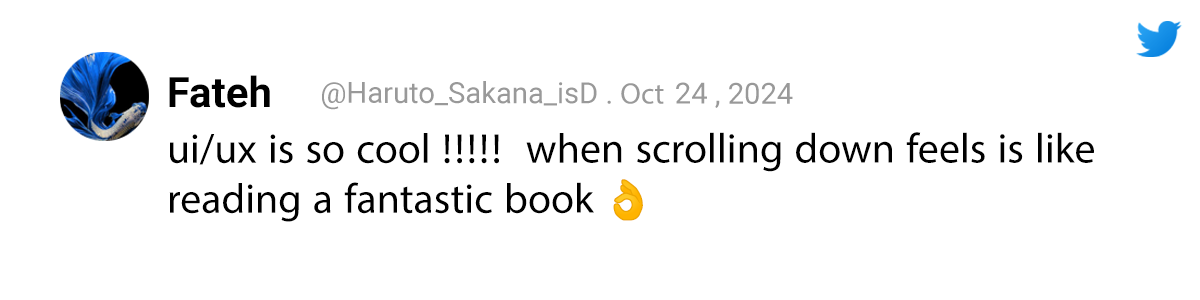
<style>
.page{position:relative;width:1200px;height:300px;background:#ffffff}
.page>*{position:absolute;margin:0}
.t1{font:41.9px "Roboto-Bold";color:#000000}
.t2{font:29.2px "Roboto-Regular";color:#999999}
.t3{font:41.7px "MyriadArabic-Regular";color:#999999}
.t4{font:58.7px "MyriadArabic-Regular";color:#000000}
.t5{font:37.5px "NotoColorEmoji-SVG";color:#000000}
</style>
<div class="page">
<p class="t1" style="left:169px;top:75px;width:101px;height:33px">Fateh</p>
<p class="t2" style="left:322px;top:81px;width:471px;height:29px">@Haruto_Sakana_isD . <span class="t3">Oct </span>24 , 2024</p>
<p class="t4" style="left:169px;top:132px;width:925px;height:90px">ui/ux is so cool !!!!!  when scrolling down feels is like reading a fantastic book <span class="t5">👌</span></p>
</div>
